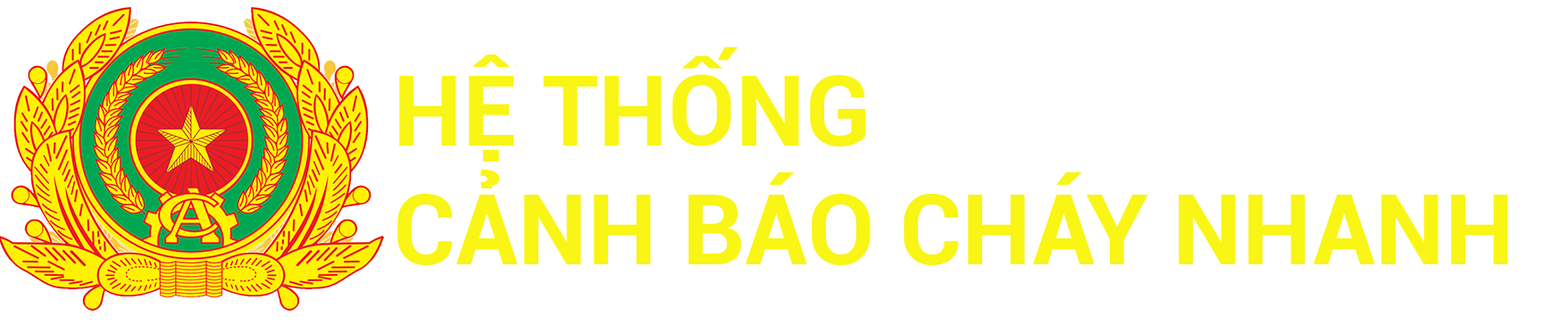
<style>
.page{position:relative;width:1568px;height:325px;background:#ffffff}
.page>*{position:absolute;margin:0}
.t1{font:98.7px "Roboto-Bold";color:#f9f515}
</style>
<div class="page">
<p class="t1" style="left:397px;top:46px;width:1111px;height:219px">HỆ THỐNG <br>CẢNH BÁO CHÁY NHANH</p>
</div>
